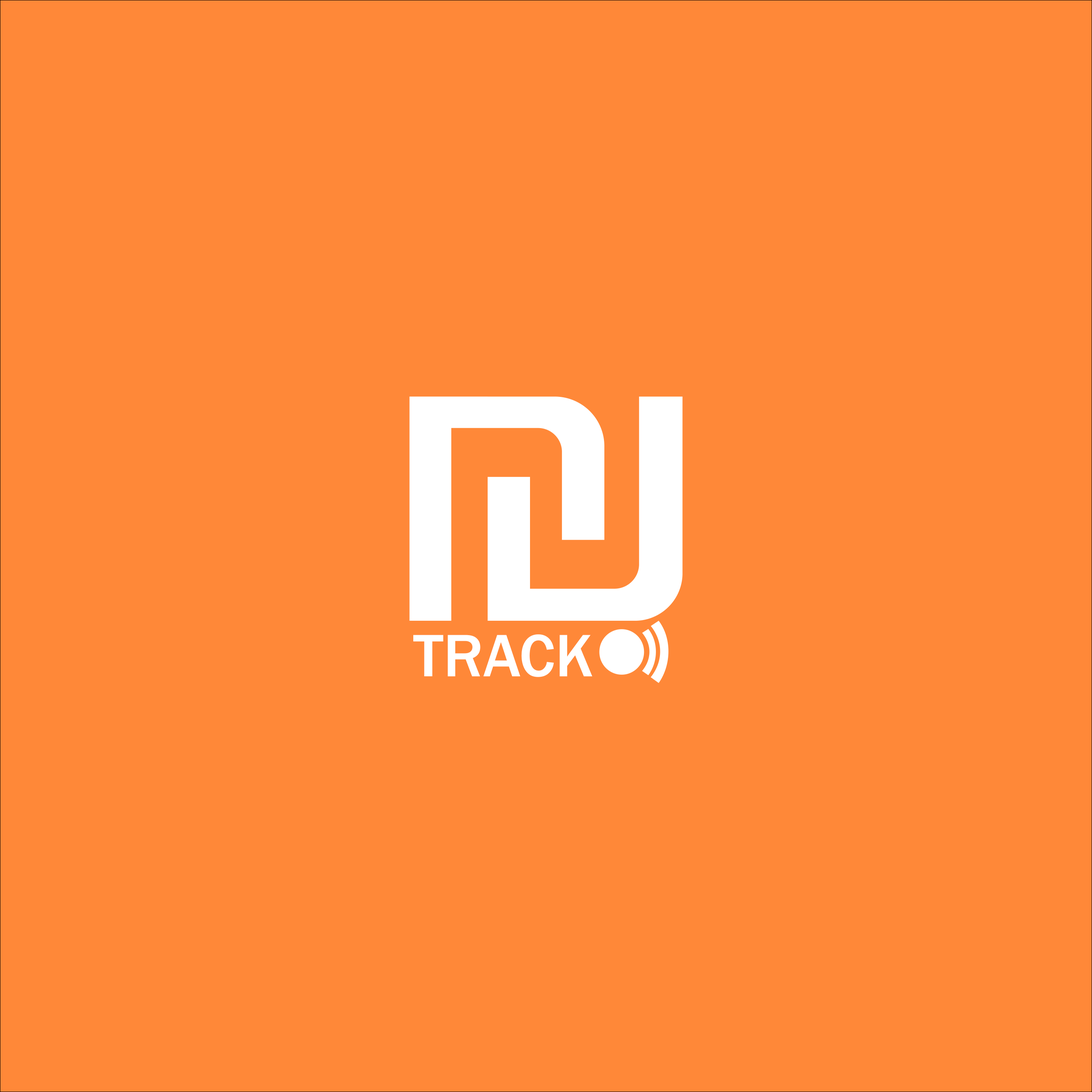
<style>
.page{position:relative;width:1092px;height:1092px;background:#ff8838}
.page>*{position:absolute;margin:0}
.t1{font:62.1px "FranklinGothic-Medium";color:#ffffff}
</style>
<div class="page">
<p class="t1" style="left:413px;top:634px;width:179px;height:43px">TRACK</p>
</div>
